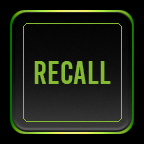
<style>
.page{position:relative;width:144px;height:144px;background:#000000}
.page>*{position:absolute;margin:0}
.t1{font:32px "Bebas-Regular";color:#85ba34}
</style>
<div class="page">
<p class="t1" style="left:34px;top:61px;width:77px;height:23px">RECALL</p>
</div>
